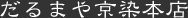
<style>
.page{position:relative;width:188px;height:18px;background:#333333}
.page>*{position:absolute;margin:0}
.t1{font:24px "DFLeiSho-SB-MP-RKSJ-H";color:#ffffff}
</style>
<div class="page">
<p class="t1" style="left:0px;top:0px;width:188px;height:18px">だるまや京染本店</p>
</div>
